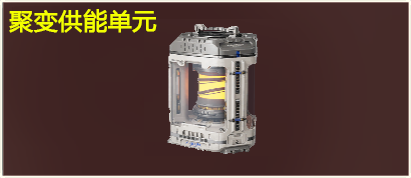
<style>
.page{position:relative;width:411px;height:178px}
.page>*{position:absolute;margin:0}
.t1{font:24px "MicrosoftYaHeiUI";color:#f4ff00;font-weight:bold}
</style>
<div class="page">
<p class="t1" style="left:9px;top:9px;width:148px;height:24px">聚变供能单元</p>
</div>
